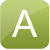
<style>
.page{position:relative;width:50px;height:50px}
.page>*{position:absolute;margin:0}
.t1{font:38px "ArialMT";color:#ffffff}
</style>
<div class="page">
<p class="t1" style="left:12px;top:10px;width:26px;height:27px">A</p>
</div>
